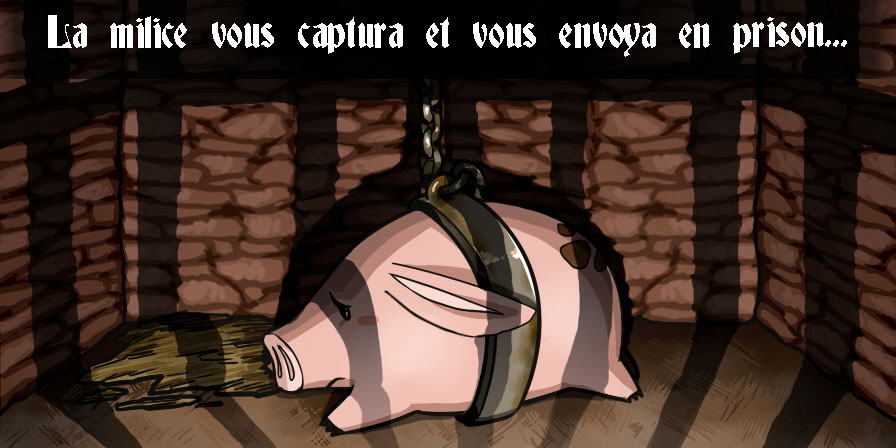
<style>
.page{position:relative;width:896px;height:448px}
.page>*{position:absolute;margin:0}
.t1{font:41.7px "Deutsch-Gothic";color:#ffffff}
</style>
<div class="page">
<p class="t1" style="left:48px;top:15px;width:799px;height:42px">La milice vous captura et vous envoya en prison...</p>
</div>
